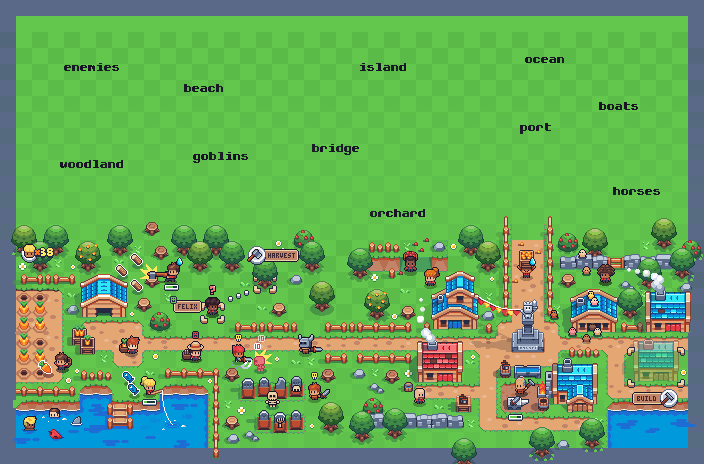
<style>
.page{position:relative;width:704px;height:464px;background:#63c74d}
.page>*{position:absolute;margin:0}
.t1{font:11px "ChevyRay---Thicket-Mono";color:#181425}
.t2{font:11px "ChevyRay---Roundabout";color:#f77622}
.t3{font:4px "PICO-8-mono";color:#3e2731;text-transform:uppercase}
.t4{font:4px "PICO-8-mono";color:#3e2731}
</style>
<div class="page">
<p class="t1" style="left:64px;top:63px;width:55px;height:8px">enemies</p>
<p class="t1" style="left:360px;top:63px;width:46px;height:8px">island</p>
<p class="t1" style="left:525px;top:57px;width:39px;height:6px">ocean</p>
<p class="t1" style="left:184px;top:84px;width:39px;height:8px">beach</p>
<p class="t1" style="left:599px;top:102px;width:39px;height:8px">boats</p>
<p class="t1" style="left:520px;top:123px;width:31px;height:11px">port</p>
<p class="t1" style="left:312px;top:144px;width:47px;height:11px">bridge</p>
<p class="t1" style="left:60px;top:160px;width:63px;height:8px">woodland</p>
<p class="t1" style="left:193px;top:152px;width:55px;height:11px">goblins</p>
<p class="t1" style="left:613px;top:187px;width:47px;height:8px">horses</p>
<p class="t1" style="left:370px;top:209px;width:55px;height:8px">orchard</p>
<p class="t2" style="left:35px;top:250px;width:5px;height:5px">x</p>
<p class="t3" style="left:268px;top:253px;width:27px;height:5px">Harvest</p>
<p class="t4" style="left:178px;top:304px;width:19px;height:5px">FELIX</p>
<p class="t4" style="left:637px;top:396px;width:19px;height:5px">BUILD</p>
</div>
